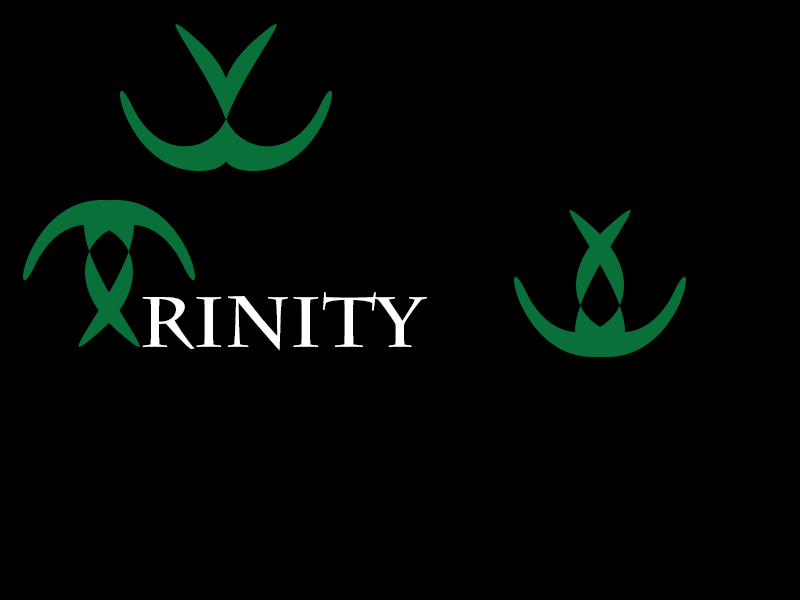
<style>
.page{position:relative;width:800px;height:600px;background:#000000}
.page>*{position:absolute;margin:0}
.t1{font:72px "CharlemagneStd-Bold";color:#ffffff}
</style>
<div class="page">
<p class="t1" style="left:142px;top:292px;width:285px;height:59px">Rinity</p>
</div>
